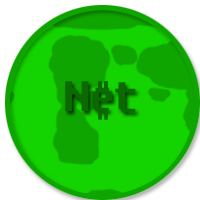
<style>
.page{position:relative;width:200px;height:200px;background:#13d300}
.page>*{position:absolute;margin:0}
.t1{font:42.3px "Fixedsys";color:#0a6a00}
</style>
<div class="page">
<p class="t1" style="left:65px;top:81px;width:48px;height:30px">Ne</p>
<p class="t1" style="left:115px;top:82px;width:21px;height:30px">t</p>
</div>
